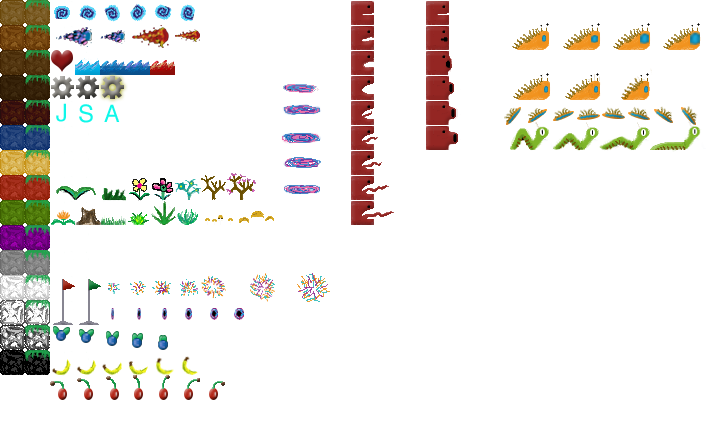
<style>
.page{position:relative;width:725px;height:425px;background:#ffffff}
.page>*{position:absolute;margin:0}
.t1{font:24px "Helvetica";letter-spacing:0.12em;color:#10f7e9}
</style>
<div class="page">
<p class="t1" style="left:56px;top:103px;width:10px;height:19px">J</p>
<p class="t1" style="left:79px;top:104px;width:14px;height:19px">S</p>
<p class="t1" style="left:104px;top:104px;width:16px;height:18px">A</p>
</div>
